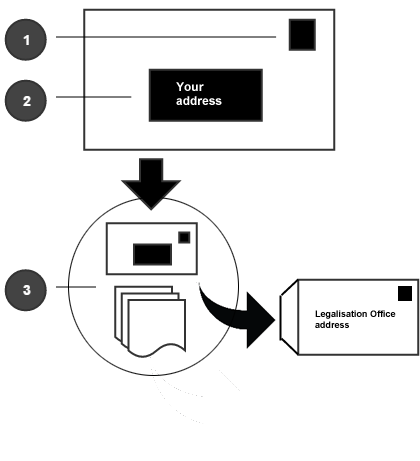
<style>
.page{position:relative;width:420px;height:461px;background:#ffffff}
.page>*{position:absolute;margin:0}
.t1{font:12px "Arial-BoldMT";color:#ffffff}
.t2{font:9px "Arial-BoldMT";color:#000000}
</style>
<div class="page">
<p class="t1" style="left:176px;top:82px;width:46px;height:23px">Your<br>address</p>
<p class="t2" style="left:315px;top:310px;width:81px;height:18px">Legalisation Office<br>address</p>
</div>
